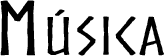
<style>
.page{position:relative;width:164px;height:56px;background:#ffffff}
.page>*{position:absolute;margin:0}
.t1{font:72px "Norse";color:#000000;font-variant:small-caps;font-weight:bold;scale:1.3 1}
</style>
<div class="page">
<p class="t1" style="left:0px;top:0px;width:164px;height:56px">Música</p>
</div>
